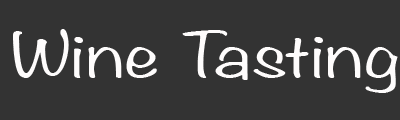
<style>
.page{position:relative;width:400px;height:120px;background:#333333}
.page>*{position:absolute;margin:0}
.t1{font:55px "Noteworthy-Light";color:#fefcfc;scale:1.5 1}
</style>
<div class="page">
<p class="t1" style="left:13px;top:29px;width:385px;height:64px">Wine Tasting</p>
</div>
